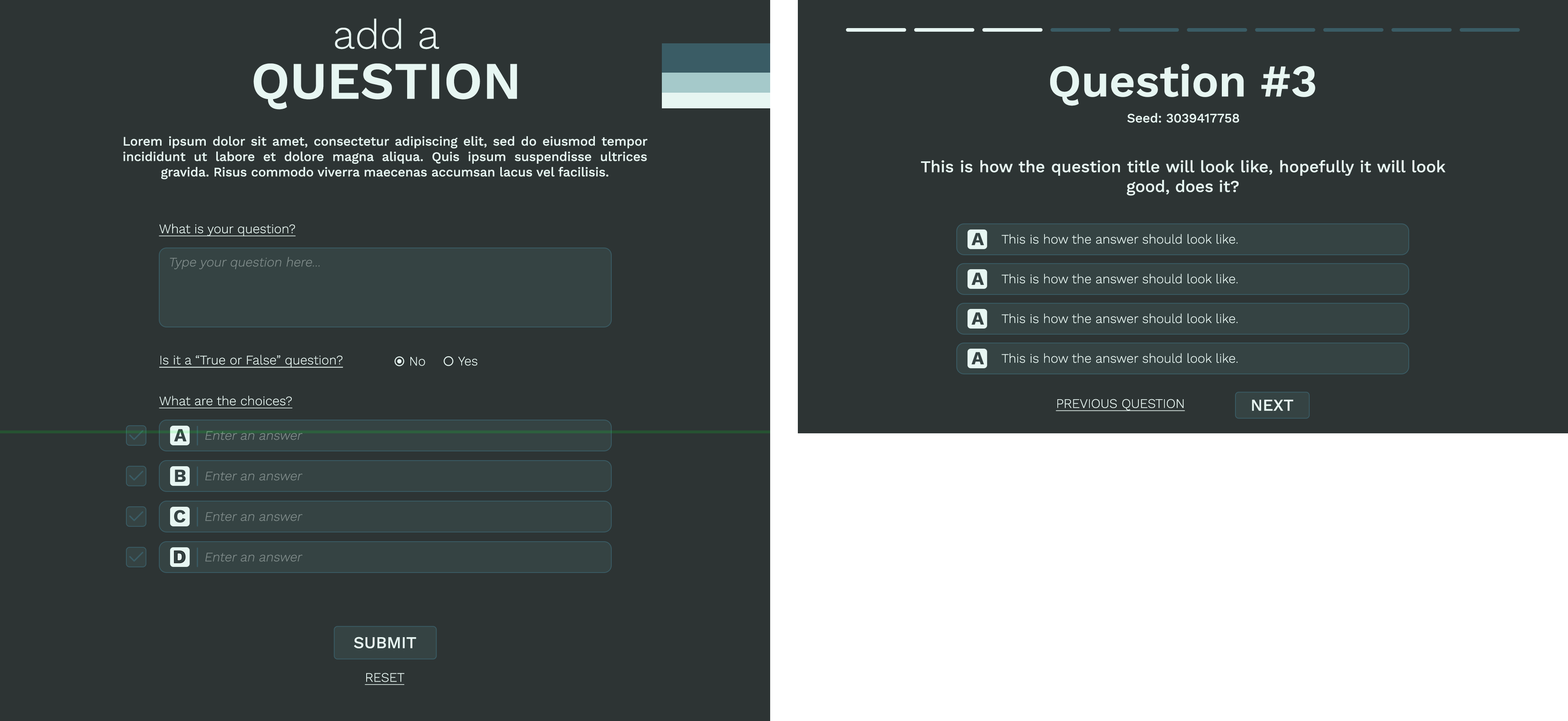
<style>
.page{position:relative;width:1568px;height:721px;background:#2d3434}
.page>*{position:absolute;margin:0}
.t1{font:52.5px/50.1px "WorkSans-SemiBold";color:#e7f6f2}
.t2{font:40.9px/50.1px "WorkSans-Light";color:#e7f6f2}
.t3{font:45.3px "WorkSans-SemiBold";color:#e7f6f2}
.t4{font:12.8px "WorkSans-Medium";color:#e7f6f2}
.t5{font:16.5px "WorkSans-Medium";color:#e7f6f2}
.t6{font:12.8px "WorkSans-Light";color:#e7f6f2;text-decoration:underline}
.t7{font:12.8px "WorkSans-Light";color:#e7f6f2}
.t8{font:12.8px "WorkSans-Light";color:#818d8c;font-style:italic}
.t9{font:13px "WorkSans-Light";color:#e7f6f2;text-decoration:underline}
.t10{font:13px "WorkSans-Light";color:#e7f6f2}
.t11{font:12.9px "WorkSans-Light";color:#e7f6f2}
.t12{font:12.9px "WorkSans-Light";color:#e7f6f2;text-transform:uppercase;text-decoration:underline}
.t13{font:16.6px "WorkSans-Medium";color:#e7f6f2;text-transform:uppercase}
.t14{font:16.5px "WorkSans-Medium";color:#e7f6f2;text-transform:uppercase}
</style>
<div class="page">
<p class="t1" style="left:254px;top:18px;width:263px;height:92px;text-align:center"><span class="t2">add a<br></span>QUESTION</p>
<p class="t3" style="left:1050px;top:64px;width:265px;height:42px">Question #3</p>
<p class="t4" style="left:1127px;top:113px;width:112px;height:10px">Seed: 3039417758</p>
<p class="t4" style="left:123px;top:136px;width:524px;height:43px;text-align:justify">Lorem ipsum dolor sit amet, consectetur adipiscing elit, sed do eiusmod tempor incididunt ut labore et dolore magna aliqua. Quis ipsum suspendisse ultrices gravida. Risus commodo viverra maecenas accumsan lacus vel facilisis.</p>
<p class="t5" style="left:921px;top:160px;width:525px;height:36px;text-align:justify">This is how the question title will look like, hopefully it will look good, does it?</p>
<p class="t6" style="left:159px;top:223px;width:137px;height:13px">What is your question?</p>
<p class="t7" style="left:1002px;top:234px;width:236px;height:10px">This is how the answer should look like.</p>
<p class="t8" style="left:170px;top:257px;width:150px;height:12px">Type your question here...</p>
<p class="t7" style="left:1002px;top:274px;width:236px;height:10px">This is how the answer should look like.</p>
<p class="t7" style="left:1002px;top:313px;width:236px;height:10px">This is how the answer should look like.</p>
<p class="t7" style="left:1002px;top:353px;width:236px;height:10px">This is how the answer should look like.</p>
<p class="t9" style="left:159px;top:355px;width:184px;height:13px">Is it a “True or False” question?</p>
<p class="t10" style="left:410px;top:357px;width:15px;height:9px">No</p>
<p class="t11" style="left:458px;top:357px;width:19px;height:9px">Yes</p>
<p class="t6" style="left:159px;top:396px;width:133px;height:12px">What are the choices?</p>
<p class="t12" style="left:1056px;top:399px;width:129px;height:12px">PREVIOUS QUESTION</p>
<p class="t13" style="left:1252px;top:400px;width:41px;height:11px">NEXT</p>
<p class="t8" style="left:205px;top:431px;width:97px;height:9px">Enter an answer</p>
<p class="t8" style="left:205px;top:471px;width:97px;height:10px">Enter an answer</p>
<p class="t8" style="left:205px;top:512px;width:97px;height:9px">Enter an answer</p>
<p class="t8" style="left:205px;top:552px;width:97px;height:10px">Enter an answer</p>
<p class="t14" style="left:354px;top:637px;width:62px;height:11px">Submit</p>
<p class="t12" style="left:365px;top:673px;width:39px;height:12px">Reset</p>
</div>
